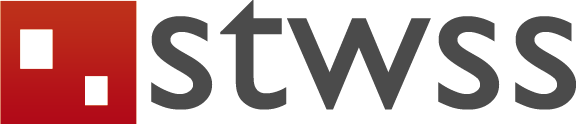
<style>
.page{position:relative;width:576px;height:124px;background:#ffffff}
.page>*{position:absolute;margin:0}
.t1{font:200px "GillSans";color:#4b4b4b}
</style>
<div class="page">
<p class="t1" style="left:151px;top:0px;width:426px;height:110px">stwss</p>
</div>
